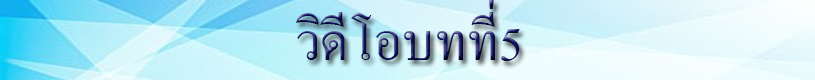
<style>
.page{position:relative;width:815px;height:80px}
.page>*{position:absolute;margin:0}
.t1{font:72px "AngsanaNew"}
</style>
<div class="page">
<p class="t1" style="left:296px;top:0px;width:224px;height:61px">วิดีโอบทที่5</p>
</div>
